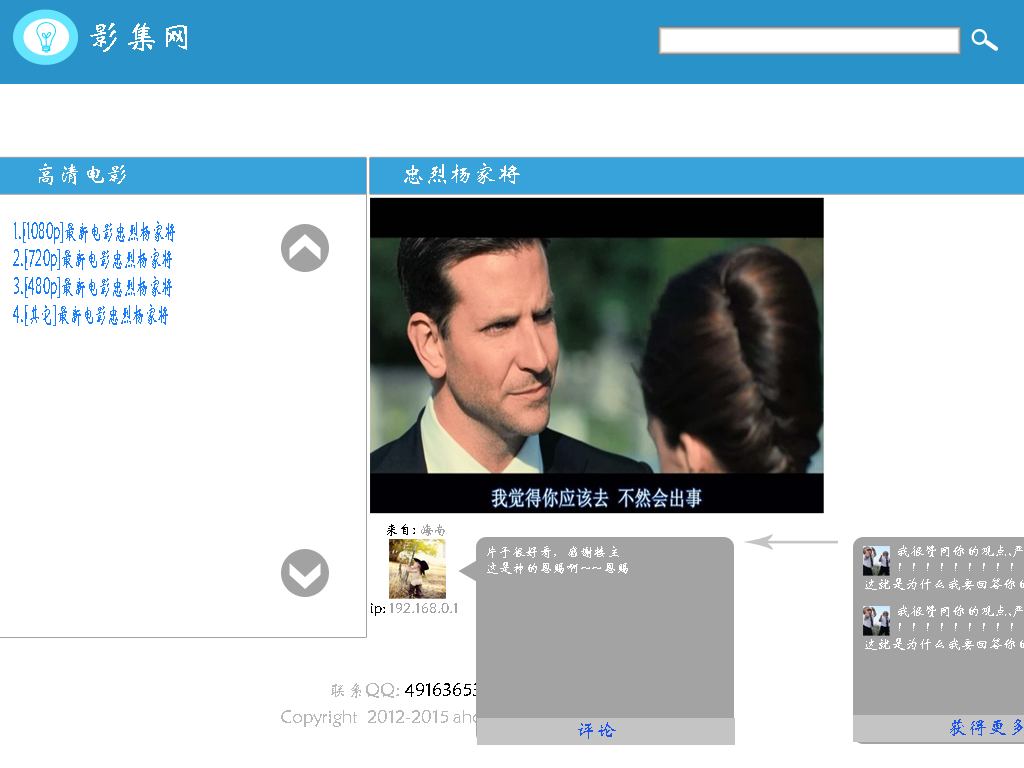
<style>
.page{position:relative;width:1024px;height:768px;background:#ffffff}
.page>*{position:absolute;margin:0}
.t1{font:36px "STXinwei";color:#ffffff}
.t2{font:24px "STXinwei";color:#ffffff}
.t3{font:24px "STXinwei";color:#177bfe;scale:0.52 1}
.t4{font:14px "STXinwei";color:#000000}
.t5{font:14px "STXinwei";color:#a3a3a3}
.t6{font:14px "STXinwei";color:#ffffff;scale:0.97 1}
.t7{font:18px "STXinwei";color:#000000}
.t8{font:18px "STXinwei";color:#b7b7b7}
.t9{font:20px "STXinwei";color:#1b51ec}
</style>
<div class="page">
<p class="t1" style="left:90px;top:23px;width:97px;height:29px">影集网</p>
<p class="t2" style="left:39px;top:163px;width:87px;height:22px">高清电影</p>
<p class="t2" style="left:404px;top:163px;width:116px;height:21px">忠烈杨家将</p>
<p class="t3" style="left:14px;top:221px;width:161px;height:23px">1.[1080p]最新电影忠烈杨家将</p>
<p class="t3" style="left:13px;top:248px;width:159px;height:23px">2.[720p]最新电影忠烈杨家将</p>
<p class="t3" style="left:14px;top:276px;width:158px;height:23px">3.[480p]最新电影忠烈杨家将</p>
<p class="t3" style="left:13px;top:304px;width:155px;height:22px">4.[其它]最新电影忠烈杨家将</p>
<p class="t4" style="left:387px;top:524px;width:58px;height:12px">来自: <span class="t5">海南</span></p>
<p class="t6" style="left:487px;top:546px;width:141px;height:28px">片子很好看，感谢楼主<br>这是神的恩赐啊~~恩赐</p>
<p class="t5" style="left:371px;top:603px;width:86px;height:13px"><span class="t4">ip: </span>192.168.0.1</p>
<p class="t7" style="left:331px;top:683px;width:150px;height:15px"><span class="t8">联系QQ: </span>49163653</p>
<p class="t8" style="left:281px;top:710px;width:294px;height:17px">Copyright©2012-2015 ahone 版权所有</p>
<p class="t9" style="left:578px;top:722px;width:38px;height:17px">评论</p>
<p class="t9" style="left:950px;top:719px;width:73px;height:17px">获得更多</p>
</div>
